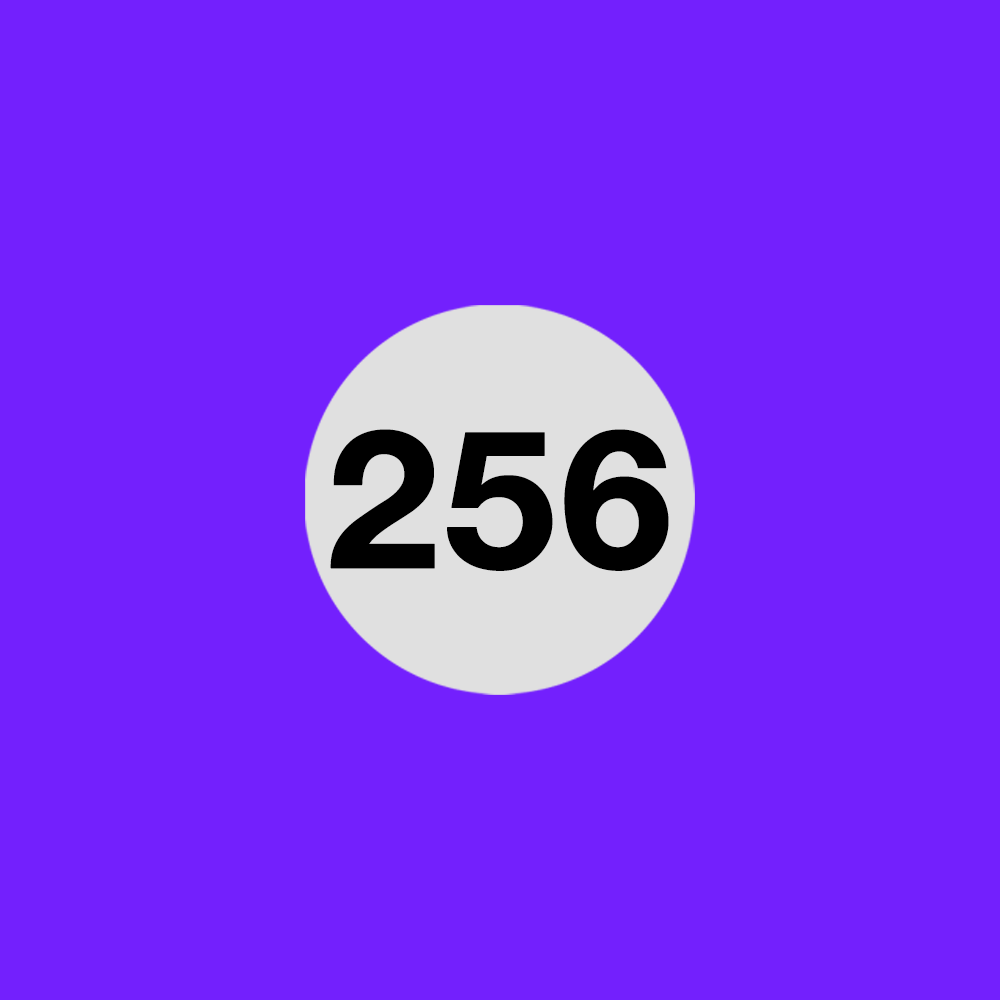
<style>
.page{position:relative;width:1000px;height:1000px;background:#7320fd}
.page>*{position:absolute;margin:0}
.t1{font:192.9px "HelveticaNeue-Bold";color:#000000;font-weight:bold;scale:1.04 1}
</style>
<div class="page">
<p class="t1" style="left:330px;top:429px;width:339px;height:142px">256</p>
</div>
